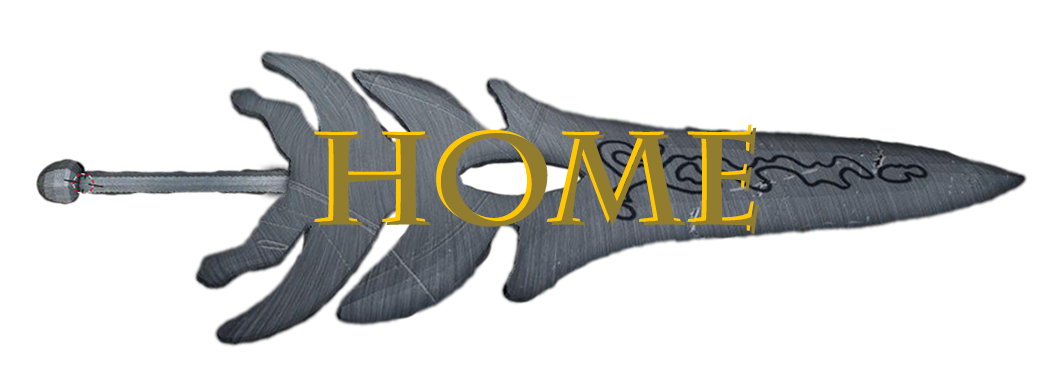
<style>
.page{position:relative;width:1063px;height:387px;background:#ffffff}
.page>*{position:absolute;margin:0}
.t1{font:127.4px "CharlemagneStd-Bold"}
.t2{font:127.4px "CharlemagneStd-Bold";color:#927c2e}
</style>
<div class="page">
<p class="t1" style="left:314px;top:124px;width:440px;height:107px">HOME</p>
<p class="t2" style="left:319px;top:127px;width:440px;height:107px">HOME</p>
</div>
